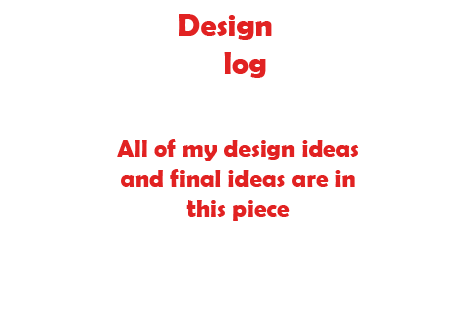
<style>
.page{position:relative;width:450px;height:314px;background:#ffffff}
.page>*{position:absolute;margin:0}
.t1{font:31.9px "BerlinSansFBDemi-Bold";color:#e12222}
.t2{font:25px "BerlinSansFBDemi-Bold";color:#e12222}
</style>
<div class="page">
<p class="t1" style="left:179px;top:14px;width:93px;height:64px;text-align:center">Design <br>     log</p>
<p class="t2" style="left:117px;top:139px;width:242px;height:82px;text-align:center">All of my design ideas and final ideas are in this piece</p>
</div>
